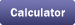
<style>
.page{position:relative;width:75px;height:25px}
.page>*{position:absolute;margin:0}
.t1{font:12px "FranklinGothic-Medium";letter-spacing:0.025em;color:#ffffff}
</style>
<div class="page">
<p class="t1" style="left:10px;top:8px;width:55px;height:9px">Calculator</p>
<p class="t1" style="left:10px;top:8px;width:55px;height:9px">Calculator</p>
</div>
